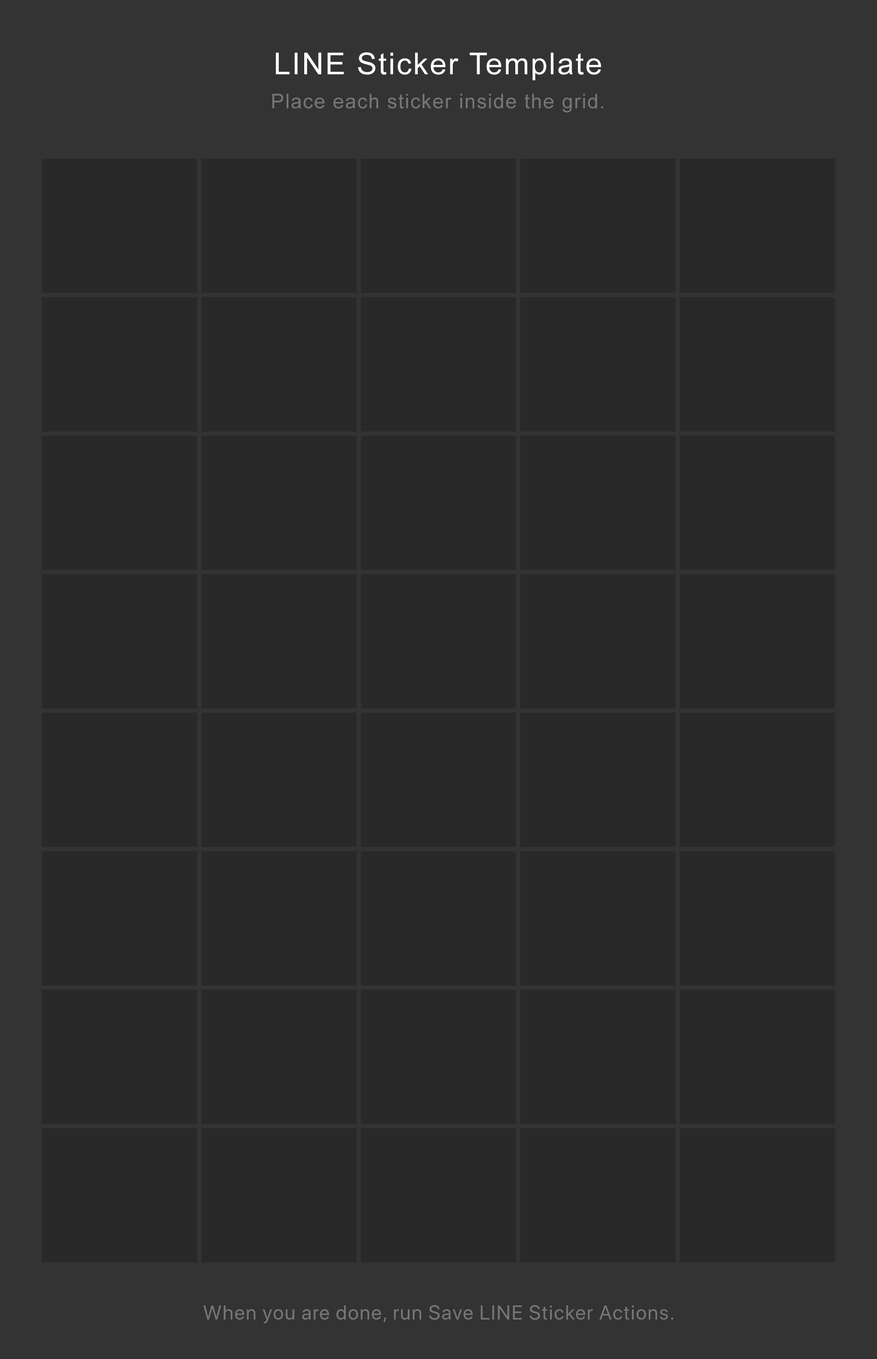
<style>
.page{position:relative;width:877px;height:1359px;background:#292929}
.page>*{position:absolute;margin:0}
.t1{font:30.2px "ArialMT";letter-spacing:0.05em;color:#ffffff}
.t2{font:20.1px "ArialMT";letter-spacing:0.05em;color:#767676}
.t3{font:20.1px "SFUIDisplay-Regular";letter-spacing:0.05em;color:#767676}
</style>
<div class="page">
<p class="t1" style="left:276px;top:52px;width:326px;height:29px">LINE Sticker Template</p>
<p class="t2" style="left:272px;top:94px;width:332px;height:18px">Place each sticker inside the grid.</p>
<p class="t3" style="left:203px;top:1305px;width:471px;height:19px">When you are done, run Save LINE Sticker Actions.</p>
</div>
